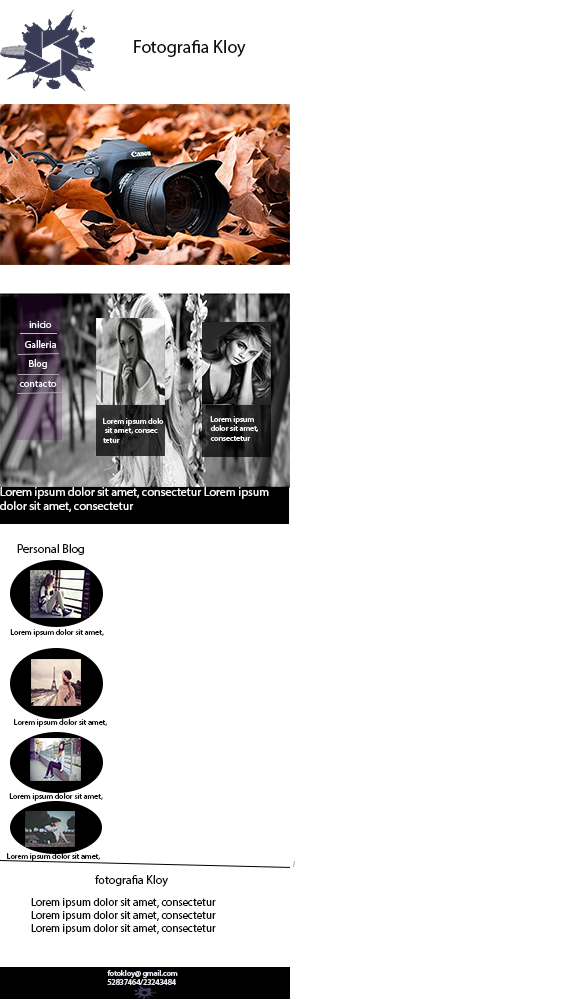
<style>
.page{position:relative;width:580px;height:1000px;background:#ffffff}
.page>*{position:absolute;margin:0}
.t1{font:18px "MyriadPro-Regular";color:#0f0f10}
.t2{font:10px "MyriadPro-Regular";color:#f2f3f7}
.t3{font:8px "MyriadPro-Regular";color:#f2f3f7}
.t4{font:12px "MyriadPro-Regular";color:#f2f3f7}
.t5{font:12px "MyriadPro-Regular";color:#0d0d0e}
.t6{font:8px "MyriadPro-Regular";color:#0d0d0e}
.t7{font:11px "MyriadPro-Regular";color:#0d0d0e}
.t8{font:8px "MyriadPro-Regular";color:#e8e9f1}
</style>
<div class="page">
<p class="t1" style="left:134px;top:40px;width:112px;height:17px">Fotografia Kloy</p>
<p class="t2" style="left:29px;top:321px;width:23px;height:7px">inicio</p>
<p class="t2" style="left:25px;top:340px;width:31px;height:8px">Galleria</p>
<p class="t2" style="left:29px;top:359px;width:18px;height:10px">Blog</p>
<p class="t2" style="left:19px;top:380px;width:38px;height:7px">contacto</p>
<p class="t3" style="left:103px;top:418px;width:61px;height:25px">Lorem ipsum dolo<br> sit amet, consec<br>tetur</p>
<p class="t3" style="left:210px;top:416px;width:48px;height:25px">Lorem ipsum <br>dolor sit amet, <br>consectetur</p>
<p class="t4" style="left:0px;top:487px;width:269px;height:25px">Lorem ipsum dolor sit amet, consectetur Lorem ipsum dolor sit amet, consectetur</p>
<p class="t5" style="left:17px;top:544px;width:67px;height:11px">Personal Blog</p>
<p class="t6" style="left:10px;top:629px;width:94px;height:8px">Lorem ipsum dolor sit amet,</p>
<p class="t6" style="left:14px;top:719px;width:93px;height:8px">Lorem ipsum dolor sit amet,</p>
<p class="t6" style="left:9px;top:793px;width:94px;height:8px">Lorem ipsum dolor sit amet,</p>
<p class="t6" style="left:7px;top:853px;width:93px;height:8px">Lorem ipsum dolor sit amet,</p>
<p class="t5" style="left:95px;top:875px;width:73px;height:12px">fotografia Kloy</p>
<p class="t7" style="left:31px;top:898px;width:185px;height:36px">Lorem ipsum dolor sit amet, consectetur <br>Lorem ipsum dolor sit amet, consectetur <br>Lorem ipsum dolor sit amet, consectetur</p>
<p class="t8" style="left:107px;top:970px;width:71px;height:15px">fotokloy@ gmail.com<br>52837464/23243484</p>
</div>
